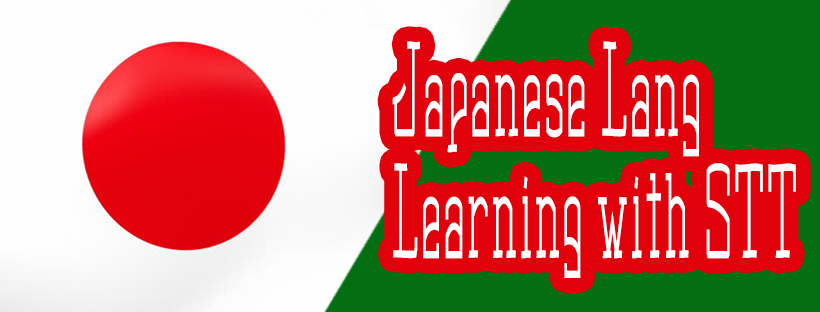
<style>
.page{position:relative;width:820px;height:312px;background:#e1010b}
.page>*{position:absolute;margin:0}
.t1{font:117.1px/40.5px "BowlodromeJiggs";letter-spacing:0.025em;color:#ffffff;scale:0.36 1}
</style>
<div class="page">
<p class="t1" style="left:392px;top:41px;width:404px;height:237px">Japanese Lang <br><br><br>Learning with STT</p>
</div>
